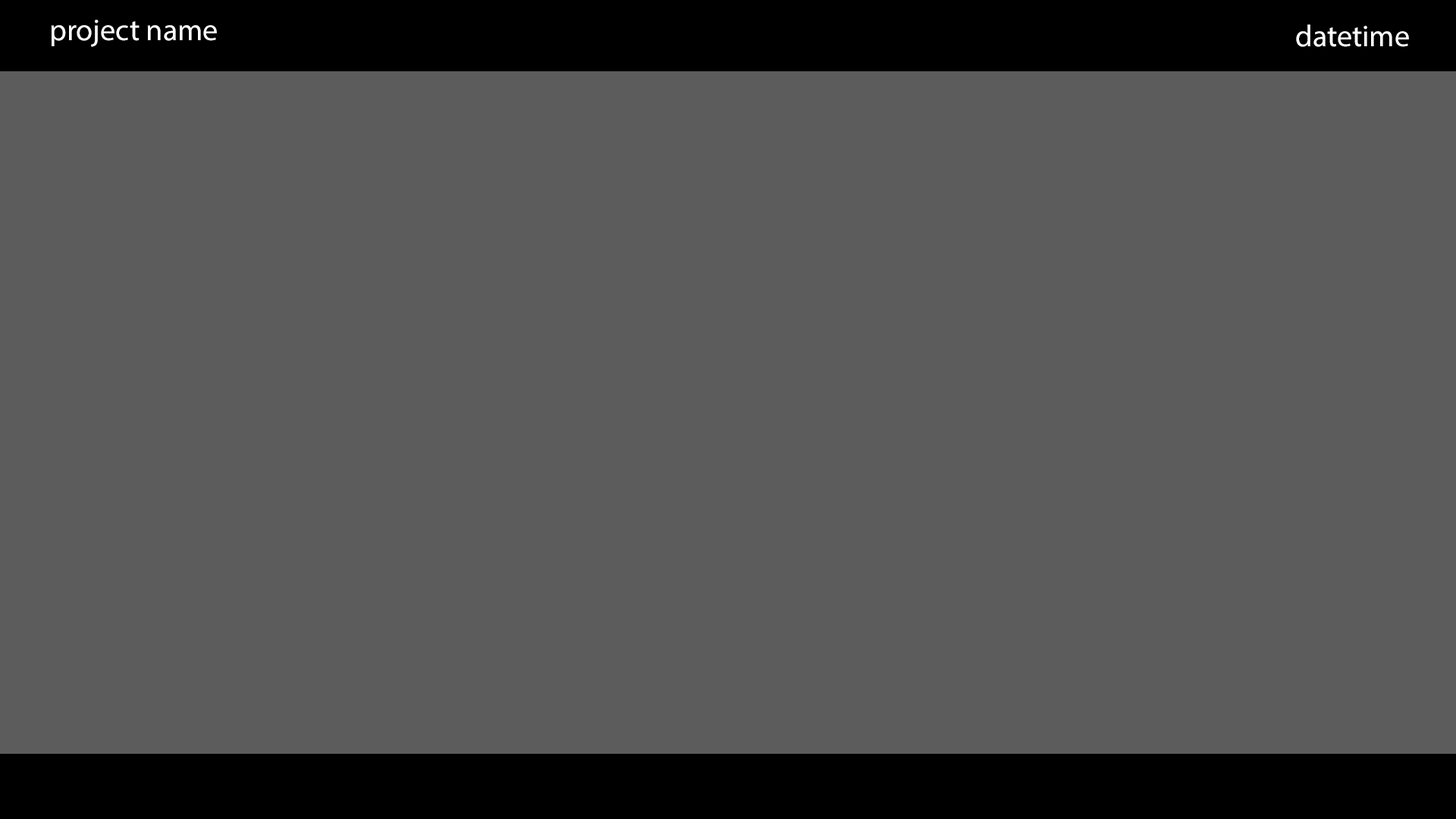
<style>
.page{position:relative;width:1456px;height:819px;background:#5c5c5c}
.page>*{position:absolute;margin:0}
.t1{font:30.3px "MyriadPro-Regular";color:#ffffff}
</style>
<div class="page">
<p class="t1" style="left:51px;top:20px;width:166px;height:27px">project name</p>
<p class="t1" style="left:1296px;top:24px;width:113px;height:23px">datetime</p>
</div>
